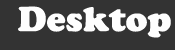
<style>
.page{position:relative;width:175px;height:50px;background:#333333}
.page>*{position:absolute;margin:0}
.t1{font:36px "CooperBlack";color:#fefefe}
</style>
<div class="page">
<p class="t1" style="left:18px;top:6px;width:153px;height:32px">Desktop</p>
</div>
